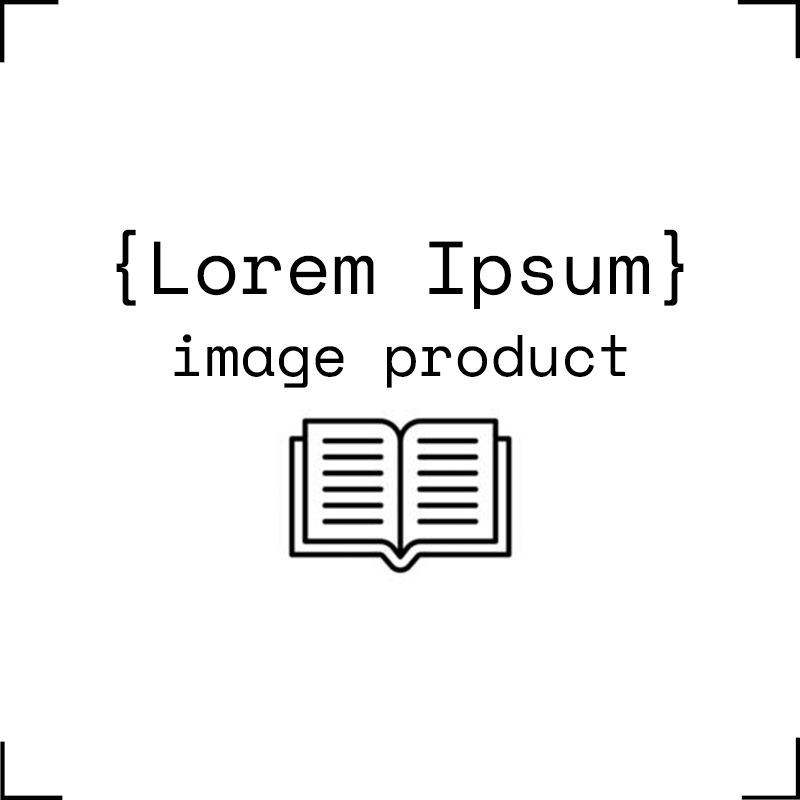
<style>
.page{position:relative;width:800px;height:800px;background:#ffffff}
.page>*{position:absolute;margin:0}
.t1{font:58.3px "SpaceMono-Regular";color:#000000}
.t2{font:75px "SpaceMono-Regular";color:#000000}
</style>
<div class="page">
<p class="t1" style="left:0px;top:0px;width:59px;height:5px;rotate:90deg">|</p>
<p class="t1" style="left:0px;top:3px;width:5px;height:60px;rotate:180deg">|</p>
<p class="t1" style="left:737px;top:0px;width:60px;height:5px;rotate:-90deg">|</p>
<p class="t1" style="left:795px;top:0px;width:5px;height:59px;rotate:180deg">|</p>
<p class="t2" style="left:116px;top:229px;width:568px;height:80px">{Lorem Ipsum}</p>
<p class="t1" style="left:174px;top:334px;width:453px;height:54px">image product</p>
<p class="t1" style="left:795px;top:737px;width:5px;height:60px">|</p>
<p class="t1" style="left:0px;top:741px;width:5px;height:60px">|</p>
<p class="t1" style="left:3px;top:795px;width:60px;height:5px;rotate:90deg">|</p>
<p class="t1" style="left:741px;top:795px;width:60px;height:5px;rotate:-90deg">|</p>
</div>
